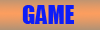
<style>
.page{position:relative;width:100px;height:30px}
.page>*{position:absolute;margin:0}
.t1{font:24px "Impact";color:#0d1df8}
</style>
<div class="page">
<p class="t1" style="left:22px;top:5px;width:52px;height:19px">GAME</p>
</div>
